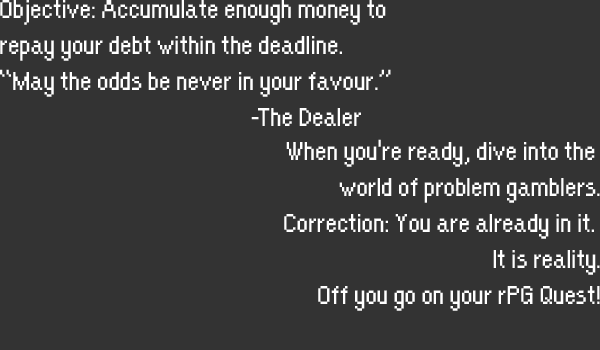
<style>
.page{position:relative;width:600px;height:350px;background:#333333}
.page>*{position:absolute;margin:0}
.t1{font:30px "OrangeKid-Regular";color:#ffffff}
</style>
<div class="page">
<p class="t1" style="left:0px;top:0px;width:391px;height:126px">Objective: Accumulate enough money to <br>repay your debt within the deadline.<br>“May the odds be never in your favour.” <br>       -The Dealer</p>
<p class="t1" style="left:284px;top:139px;width:316px;height:172px;text-align:right">When you're ready, dive into the <br>world of problem gamblers.<br>Correction: You are already in it. <br>It is reality.<br>Off you go on your rPG Quest!</p>
</div>
